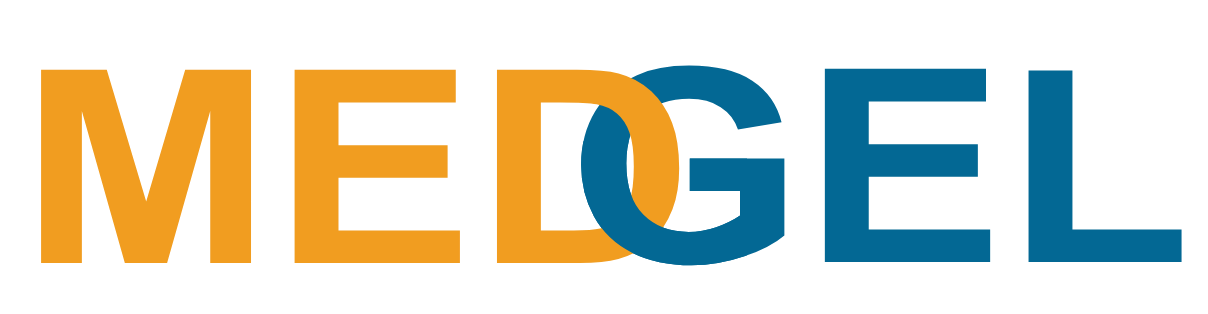
<style>
.page{position:relative;width:1208px;height:314px;background:#ffffff}
.page>*{position:absolute;margin:0}
.t1{font:269.9px "Arial-BoldMT";color:#036894;scale:1.13 1}
.t2{font:269.9px "Arial-BoldMT";color:#f19d20;scale:1.13 1}
</style>
<div class="page">
<p class="t1" style="left:581px;top:65px;width:601px;height:201px">GEL</p>
<p class="t2" style="left:41px;top:69px;width:639px;height:194px">MED</p>
</div>
